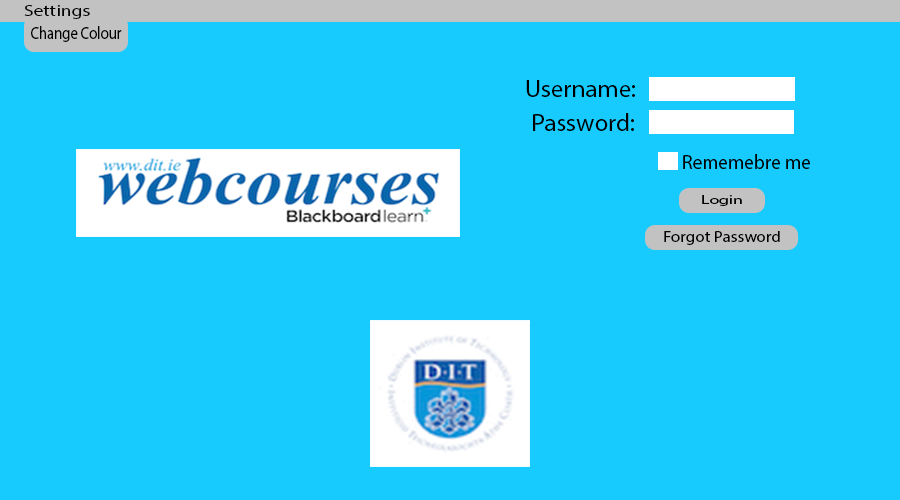
<style>
.page{position:relative;width:900px;height:500px;background:#17cbff}
.page>*{position:absolute;margin:0}
.t1{font:16.4px "MyriadPro-Regular";color:#000000;scale:1.19 1}
.t2{font:17.6px "MyriadPro-Regular";color:#000000;scale:0.83 1}
.t3{font:25px "MyriadPro-Regular";color:#000000}
.t4{font:20.8px "MyriadPro-Regular";color:#000000;scale:0.93 1}
.t5{font:12.5px "MyriadPro-Regular";color:#000000;scale:1.43 1}
.t6{font:15.1px "MyriadPro-Regular";color:#000000;scale:1.12 1}
</style>
<div class="page">
<p class="t1" style="left:24px;top:5px;width:66px;height:14px">Settings</p>
<p class="t2" style="left:31px;top:26px;width:91px;height:16px">Change Colour</p>
<p class="t3" style="left:526px;top:80px;width:109px;height:17px">Username:</p>
<p class="t3" style="left:533px;top:113px;width:101px;height:18px">Password:</p>
<p class="t4" style="left:683px;top:154px;width:127px;height:15px">Rememebre me</p>
<p class="t5" style="left:702px;top:195px;width:40px;height:11px">Login</p>
<p class="t6" style="left:664px;top:231px;width:116px;height:14px">Forgot Password</p>
</div>
